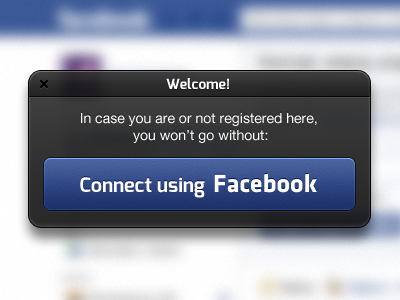
<style>
.page{position:relative;width:400px;height:300px}
.page>*{position:absolute;margin:0}
.t1{font:14px "Exo-Bold";color:#ffffff}
.t2{font:14px "HelveticaNeue";color:#ffffff}
.t3{font:20px "Exo-Bold";color:#ffffff}
.t4{font:26px "KlavikaBold-Bold";color:#ffffff}
</style>
<div class="page">
<p class="t1" style="left:166px;top:78px;width:63px;height:11px">Welcome!</p>
<p class="t2" style="left:81px;top:113px;width:236px;height:30px;text-align:center">In case you are or not registered here, <br>you won’t go without:</p>
<p class="t3" style="left:80px;top:173px;width:237px;height:25px">Connect using <span class="t4">Facebook</span></p>
</div>
